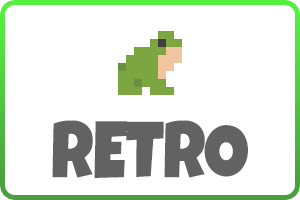
<style>
.page{position:relative;width:300px;height:200px;background:#ffffff}
.page>*{position:absolute;margin:0}
.t1{font:80.5px "LuckiestGuy-Regular";letter-spacing:-0.01em;color:#626262;text-transform:uppercase;scale:0.87 1}
</style>
<div class="page">
<p class="t1" style="left:52px;top:120px;width:196px;height:58px">rETRO</p>
</div>
